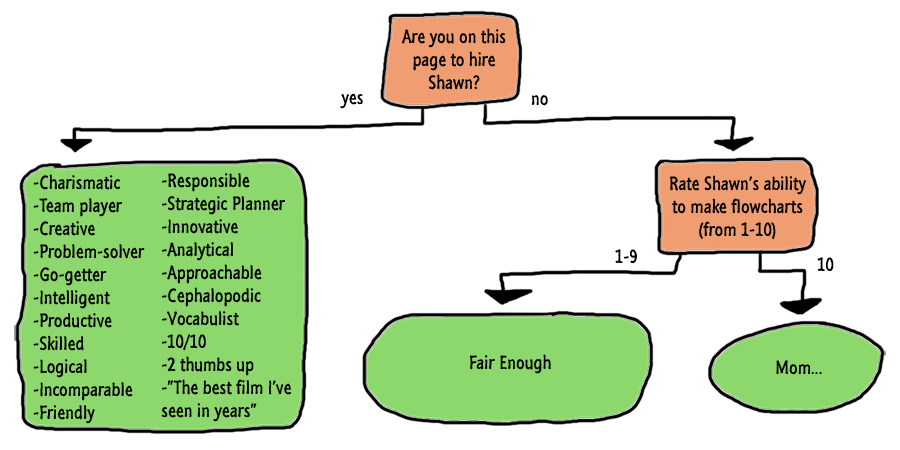
<style>
.page{position:relative;width:900px;height:450px;background:#ffffff}
.page>*{position:absolute;margin:0}
.t1{font:19.2px "SegoeMarker";color:#000000}
</style>
<div class="page">
<p class="t1" style="left:402px;top:28px;width:104px;height:62px;text-align:center">Are you on this page to hire Shawn?</p>
<p class="t1" style="left:340px;top:93px;width:23px;height:16px">yes</p>
<p class="t1" style="left:532px;top:95px;width:16px;height:11px">no</p>
<p class="t1" style="left:33px;top:174px;width:112px;height:250px">-Charismatic<br>-Team player<br>-Creative<br>-Problem-solver<br>-Go-getter<br>-Intelligent<br>-Productive<br>-Skilled<br>-Logical<br>-Incomparable<br>-Friendly</p>
<p class="t1" style="left:161px;top:173px;width:130px;height:249px">-Responsible<br>-Strategic Planner<br>-Innovative<br>-Analytical<br>-Approachable<br>-Cephalopodic<br>-Vocabulist<br>-10/10<br>-2 thumbs up<br>-”The best film I’ve seen in years”<br>-</p>
<p class="t1" style="left:670px;top:175px;width:136px;height:64px;text-align:center">Rate Shawn’s ability to make flowcharts (from 1-10)</p>
<p class="t1" style="left:615px;top:249px;width:22px;height:15px">1-9</p>
<p class="t1" style="left:817px;top:257px;width:17px;height:14px">10</p>
<p class="t1" style="left:470px;top:354px;width:81px;height:20px">Fair Enough</p>
<p class="t1" style="left:776px;top:360px;width:46px;height:15px">Mom...</p>
</div>
